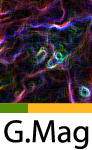
<style>
.page{position:relative;width:92px;height:150px}
.page>*{position:absolute;margin:0}
.t1{font:32.3px "MyriadPro-Regular";color:#000000}
</style>
<div class="page">
<p class="t1" style="left:4px;top:120px;width:85px;height:29px">G.Mag</p>
</div>
